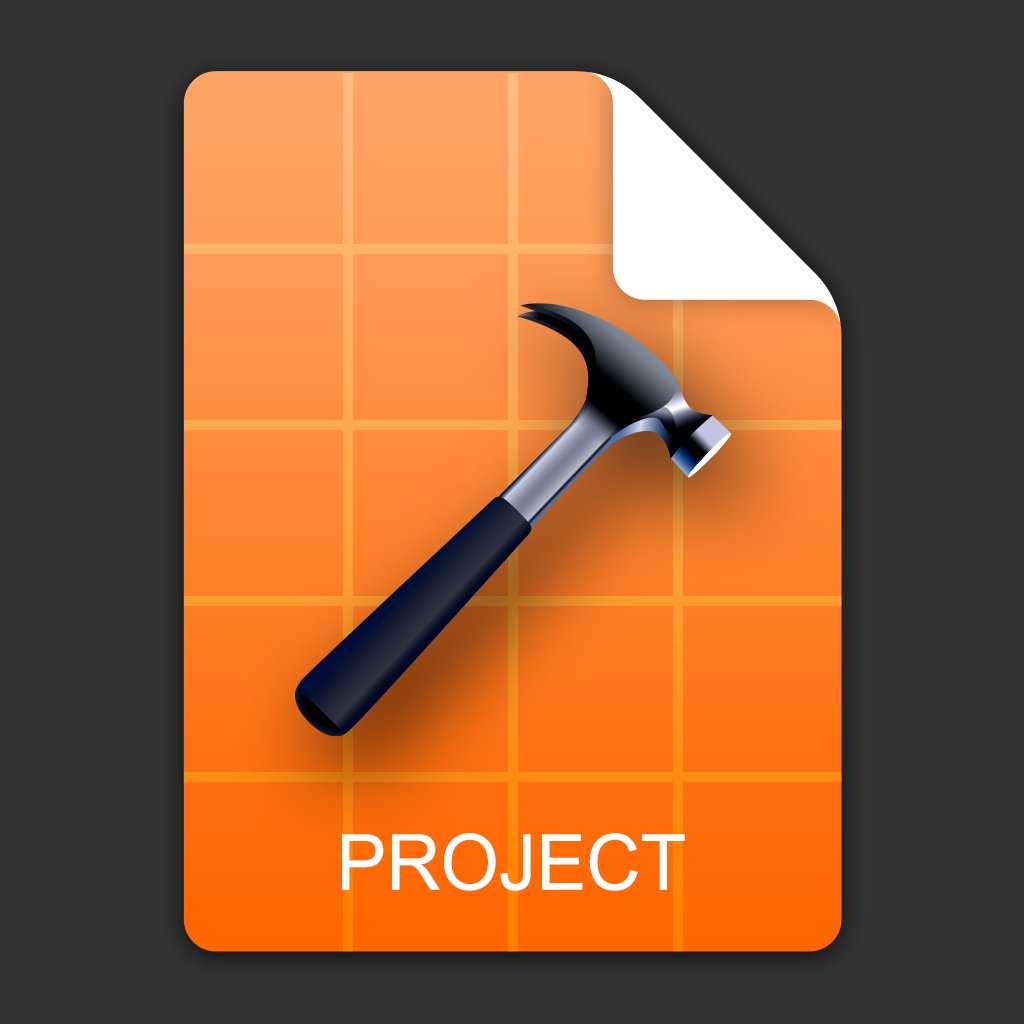
<style>
.page{position:relative;width:1024px;height:1024px;background:#333333}
.page>*{position:absolute;margin:0}
.t1{font:77.3px "ArialMT";color:#ffffff}
</style>
<div class="page">
<p class="t1" style="left:342px;top:833px;width:343px;height:58px">PROJECT</p>
</div>
